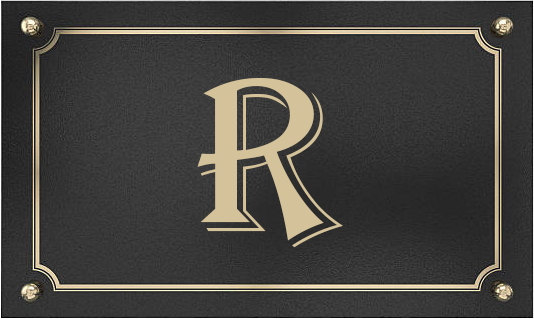
<style>
.page{position:relative;width:534px;height:319px}
.page>*{position:absolute;margin:0}
.t1{font:226px "Algerian";color:#d4c29a}
</style>
<div class="page">
<p class="t1" style="left:197px;top:78px;width:146px;height:170px">R</p>
</div>
